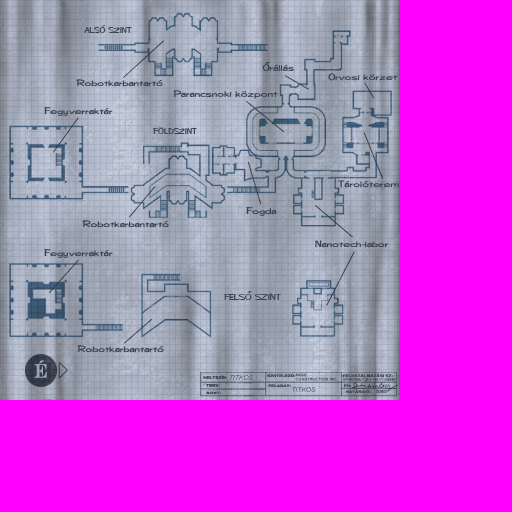
<style>
.page{position:relative;width:512px;height:512px;background:#ff00ff}
.page>*{position:absolute;margin:0}
.t1{font:8.2px "DiegoCE";color:#3a4250;scale:1.24 1}
.t2{font:9.1px "DiegoCE";color:#3a4250;scale:1.4 1}
.t3{font:9.2px "DiegoCE";color:#3a4250;scale:1.24 1}
.t4{font:19.5px "EngraversCE";color:#9da4b2;font-weight:bold;scale:0.81 1}
.t5{font:3.9px "Arial-BoldMT";color:#3a4250;font-weight:bold;scale:1.13 1}
.t6{font:6.2px "Arial-ItalicMT";font-style:italic;scale:1.09 1}
.t7{font:3.2px "Arial-BoldMT";color:#3a4250;font-weight:bold;scale:1.37 1}
.t8{font:6.2px "Arial-ItalicMT";scale:1.09 1}
.t9{font:3.1px "Arial-BoldMT";color:#3a4250;font-weight:bold;scale:1.41 1}
</style>
<div class="page">
<p class="t1" style="left:84px;top:25px;width:48px;height:8px">ALSÓ SZINT</p>
<p class="t2" style="left:262px;top:62px;width:32px;height:9px">Őrállás</p>
<p class="t2" style="left:328px;top:73px;width:70px;height:8px">Orvosi körzet</p>
<p class="t2" style="left:76px;top:79px;width:87px;height:8px">Robotkarbantartó</p>
<p class="t2" style="left:173px;top:90px;width:105px;height:9px">Parancsnoki központ</p>
<p class="t2" style="left:44px;top:107px;width:69px;height:9px">Fegyverraktár</p>
<p class="t1" style="left:153px;top:127px;width:44px;height:7px">FÖLDSZINT</p>
<p class="t2" style="left:338px;top:180px;width:61px;height:8px">Tárolóterem</p>
<p class="t2" style="left:246px;top:207px;width:31px;height:9px">Fogda</p>
<p class="t2" style="left:82px;top:220px;width:87px;height:8px">Robotkarbantartó</p>
<p class="t2" style="left:315px;top:240px;width:74px;height:8px">Nanotech-labor</p>
<p class="t2" style="left:44px;top:249px;width:69px;height:9px">Fegyverraktár</p>
<p class="t3" style="left:224px;top:291px;width:57px;height:9px"><span class="t1">FE</span>LSŐ SZINT</p>
<p class="t2" style="left:77px;top:345px;width:87px;height:8px">Robotkarbantartó</p>
<p class="t4" style="left:34px;top:360px;width:13px;height:18px">É</p>
<p class="t5" style="left:203px;top:375px;width:24px;height:4px">HELYSZÍN:</p>
<p class="t6" style="left:230px;top:375px;width:24px;height:5px">TITKOS</p>
<p class="t7" style="left:267px;top:374px;width:29px;height:4px">KIVITELEZŐ:</p>
<p class="t7" style="left:342px;top:373px;width:51px;height:5px">FELHATALMAZÁSI SZ:</p>
<p class="t5" style="left:206px;top:384px;width:14px;height:3px">TERV:</p>
<p class="t7" style="left:268px;top:384px;width:23px;height:3px">FELADAT:</p>
<p class="t8" style="left:292px;top:387px;width:24px;height:5px">TITKOS</p>
<p class="t7" style="left:343px;top:384px;width:9px;height:4px">FH:</p>
<p class="t7" style="left:346px;top:389px;width:25px;height:4px">HATÁRIDŐ:</p>
<p class="t9" style="left:206px;top:391px;width:15px;height:4px">SZINT:</p>
</div>
